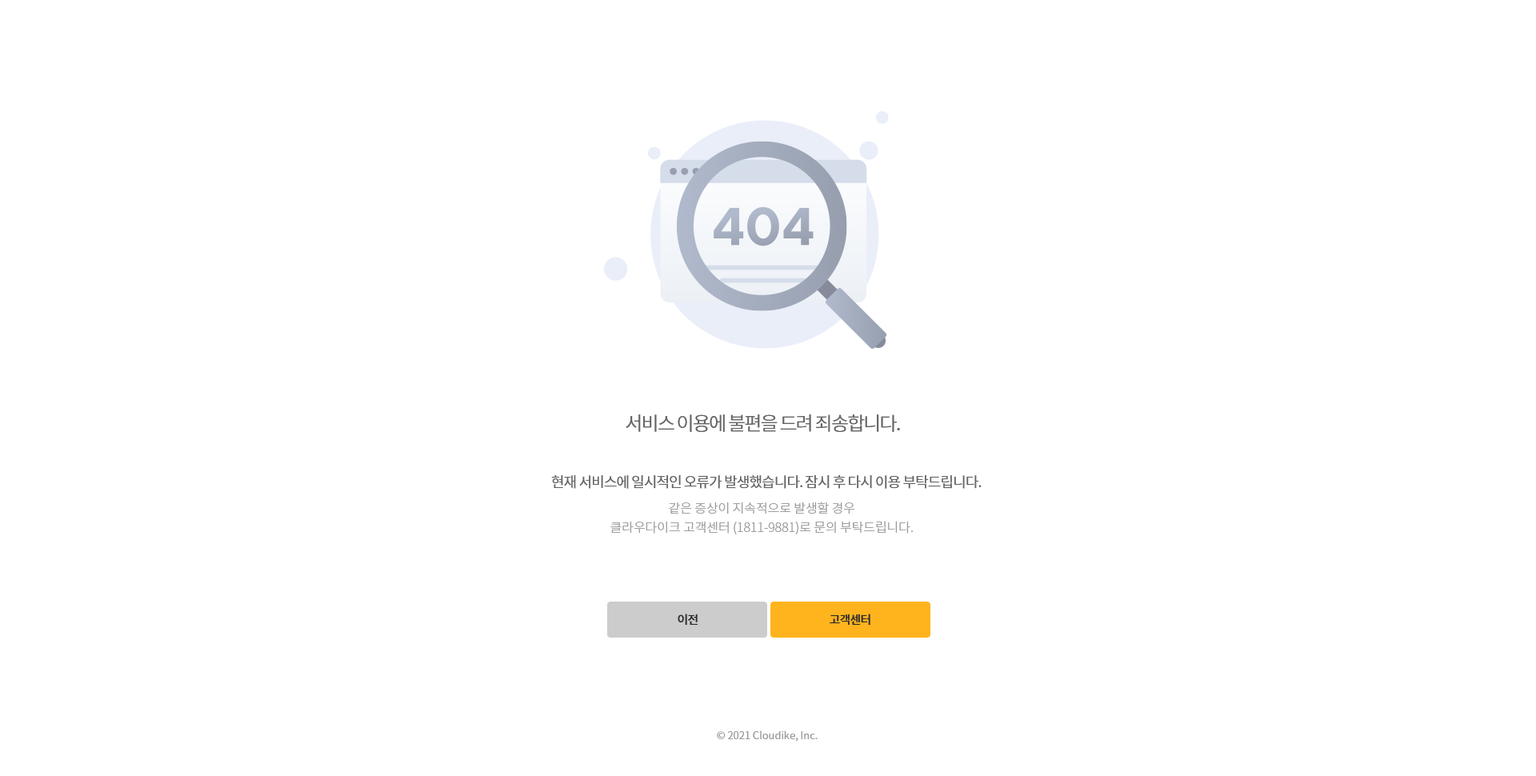
<style>
.page{position:relative;width:1536px;height:776px;background:#ffffff}
.page>*{position:absolute;margin:0}
.t1{font:19.2px "NotoSansCJKkr-DemiLight";letter-spacing:-0.075em;color:#666666}
.t2{font:14.4px "NotoSansCJKkr-Regular";letter-spacing:-0.05em;color:#666666}
.t3{font:12.8px/19.2px "NotoSansCJKkr-Light";letter-spacing:-0.005em;color:#999999}
.t4{font:12px "NotoSansCJKkr-Medium";letter-spacing:-0.05em;color:#2d2d2d}
.t5{font:10.4px "NotoSansCJKkr-DemiLight";color:#999999}
</style>
<div class="page">
<p class="t1" style="left:626px;top:414px;width:274px;height:18px">서비스 이용에 불편을 드려 죄송합니다.</p>
<p class="t2" style="left:551px;top:474px;width:431px;height:15px">현재 서비스에 일시적인 오류가 발생했습니다. 잠시 후 다시 이용 부탁드립니다.</p>
<p class="t3" style="left:611px;top:502px;width:303px;height:33px;text-align:center">같은 증상이 지속적으로 발생할 경우<br>클라우다이크 고객센터 (1811-9881)로 문의 부탁드립니다.</p>
<p class="t4" style="left:678px;top:614px;width:20px;height:11px">이전</p>
<p class="t4" style="left:830px;top:614px;width:41px;height:12px">고객센터</p>
<p class="t5" style="left:717px;top:731px;width:101px;height:11px">© 2021 Cloudike, Inc.</p>
</div>
